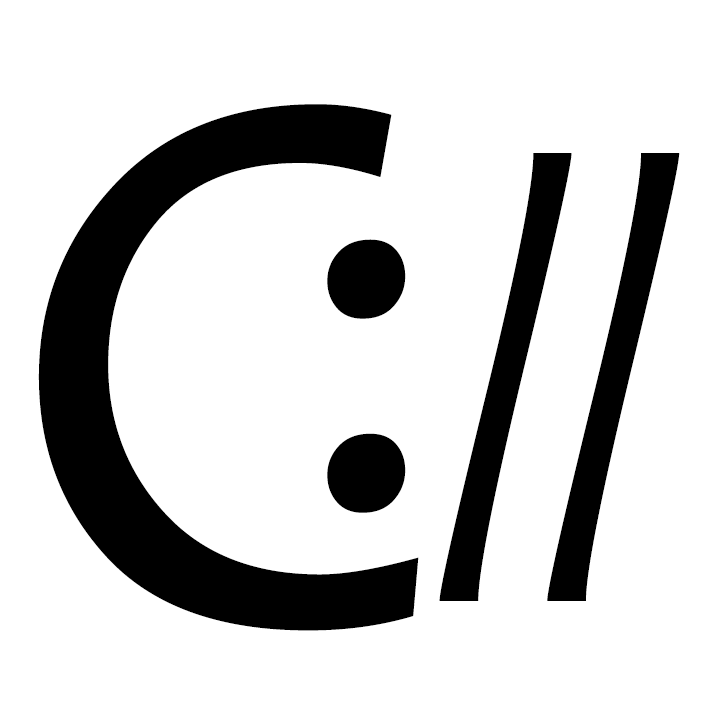
<style>
.page{position:relative;width:720px;height:720px;background:#ffffff}
.page>*{position:absolute;margin:0}
.t1{font:799.8px "Candara";color:#000000}
.t2{font:521.9px "Candara";color:#000000}
.t3{font:582.8px "Candara";color:#000000}
</style>
<div class="page">
<p class="t1" style="left:38px;top:104px;width:381px;height:527px">C</p>
<p class="t2" style="left:439px;top:153px;width:133px;height:448px">/</p>
<p class="t2" style="left:547px;top:153px;width:133px;height:448px">/</p>
<p class="t3" style="left:327px;top:239px;width:79px;height:274px">:</p>
</div>
